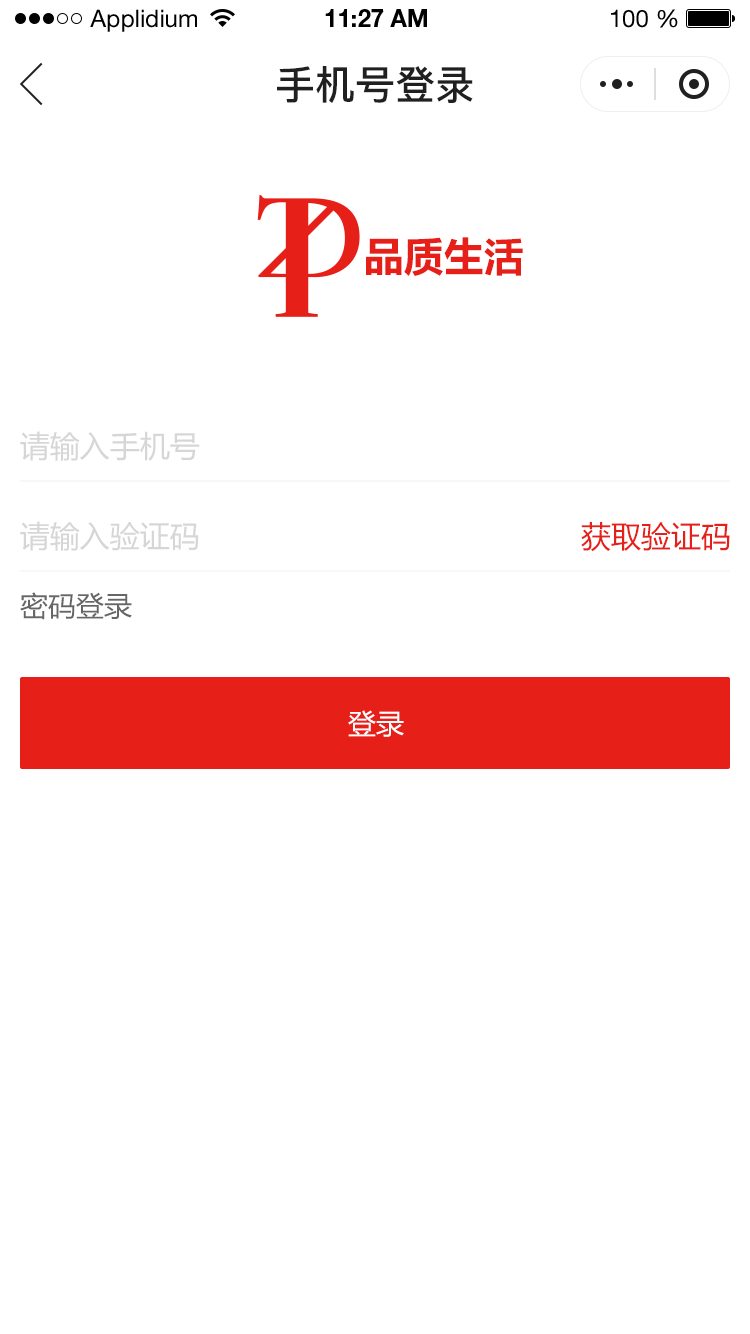
<style>
.page{position:relative;width:750px;height:1334px;background:#ffffff}
.page>*{position:absolute;margin:0}
.t1{font:24px "HelveticaNeueLTStd-Roman";color:#000000}
.t2{font:24px "HelveticaNeueLTStd-Bd";color:#000000}
.t3{font:40px "PingFang-SC-Bold";color:#202020;text-transform:uppercase}
.t4{font:40px "MicrosoftYaHei-Bold";color:#e61f18;text-transform:uppercase}
.t5{font:30px "MicrosoftYaHei";color:#d6d6d6;text-transform:uppercase}
.t6{font:30px "MicrosoftYaHei";color:#e61f18;text-transform:uppercase}
.t7{font:28px "MicrosoftYaHei";color:#666666;text-transform:uppercase}
.t8{font:28px "MicrosoftYaHei";color:#ffffff;text-transform:uppercase}
</style>
<div class="page">
<p class="t1" style="left:90px;top:9px;width:107px;height:23px">Applidium</p>
<p class="t2" style="left:325px;top:9px;width:102px;height:18px">11:27 AM</p>
<p class="t1" style="left:611px;top:9px;width:67px;height:19px">100 %</p>
<p class="t3" style="left:277px;top:66px;width:196px;height:37px">手机号登录</p>
<p class="t4" style="left:366px;top:237px;width:157px;height:39px">品质生活</p>
<p class="t5" style="left:20px;top:431px;width:180px;height:30px">请输入手机号</p>
<p class="t5" style="left:20px;top:521px;width:179px;height:30px">请输入验证码</p>
<p class="t6" style="left:581px;top:522px;width:149px;height:30px">获取验证码</p>
<p class="t7" style="left:20px;top:592px;width:112px;height:28px">密码登录</p>
<p class="t8" style="left:348px;top:710px;width:56px;height:27px">登录</p>
</div>
